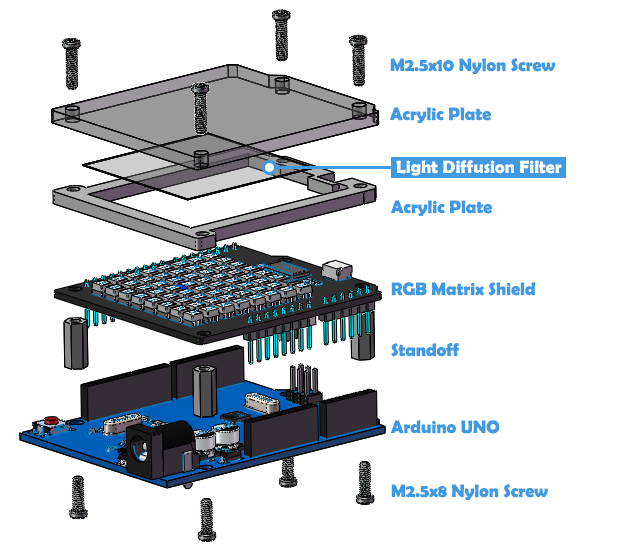
<style>
.page{position:relative;width:621px;height:546px;background:#ffffff}
.page>*{position:absolute;margin:0}
.t1{font:18px "BerlinSansFBDemi-Bold";color:#409ae3}
.t2{font:18px "BerlinSansFBDemi-Bold";color:#ffffff}
</style>
<div class="page">
<p class="t1" style="left:390px;top:58px;width:165px;height:16px">M2.5x10 Nylon Screw</p>
<p class="t1" style="left:390px;top:107px;width:101px;height:16px">Acrylic Plate</p>
<p class="t2" style="left:396px;top:160px;width:166px;height:16px">Light Diffusion Filter</p>
<p class="t1" style="left:391px;top:200px;width:101px;height:16px">Acrylic Plate</p>
<p class="t1" style="left:391px;top:282px;width:144px;height:14px">RGB Matrix Shield</p>
<p class="t1" style="left:391px;top:343px;width:68px;height:14px">Standoff</p>
<p class="t1" style="left:391px;top:420px;width:109px;height:14px">Arduino UNO</p>
<p class="t1" style="left:391px;top:484px;width:157px;height:16px">M2.5x8 Nylon Screw</p>
</div>
